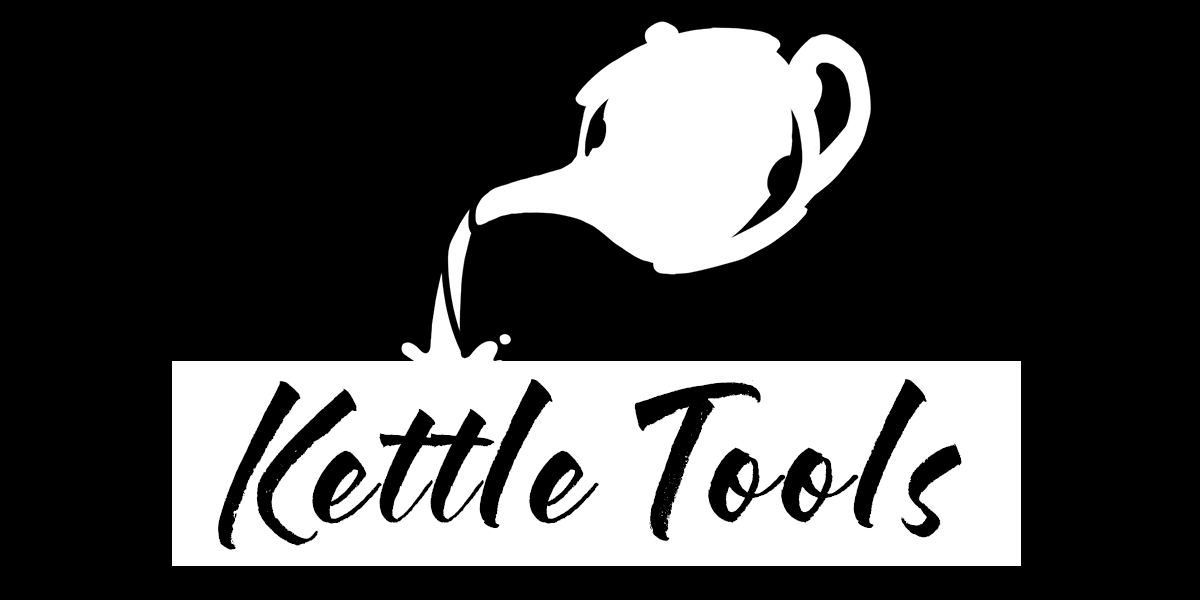
<style>
.page{position:relative;width:1200px;height:600px;background:#000000}
.page>*{position:absolute;margin:0}
.t1{font:151.2px "HelloBloomieScript-Regular";letter-spacing:0.06em;color:#000000;scale:0.91 1}
</style>
<div class="page">
<p class="t1" style="left:217px;top:367px;width:783px;height:202px">Kettle Tools</p>
</div>
